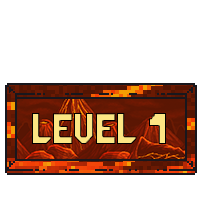
<style>
.page{position:relative;width:200px;height:200px;background:#ffffff}
.page>*{position:absolute;margin:0}
.t1{font:34.9px "GalacticaGridRegular";color:#fce583;scale:0.97 1}
</style>
<div class="page">
<p class="t1" style="left:32px;top:113px;width:134px;height:31px">Level 1</p>
</div>
